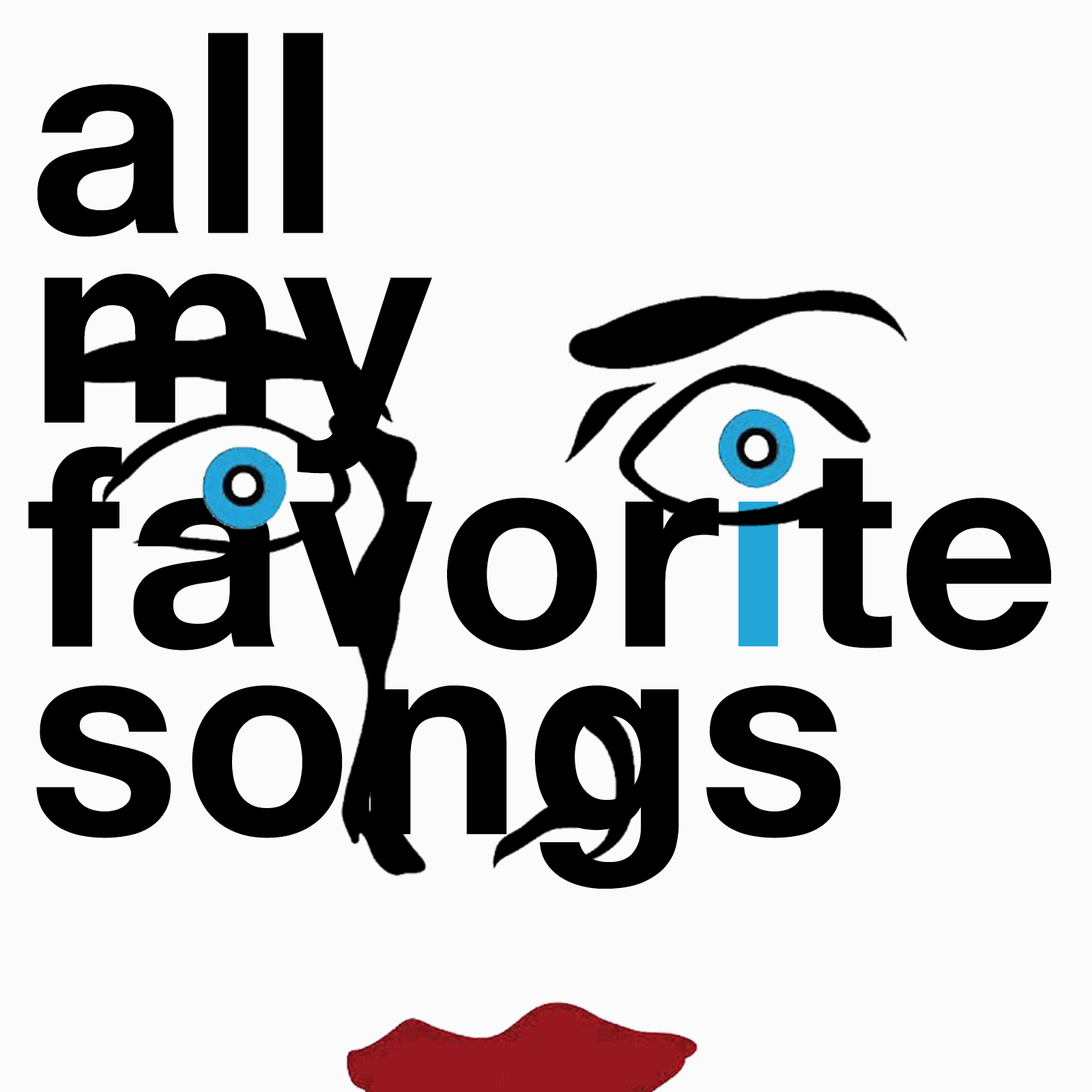
<style>
.page{position:relative;width:1092px;height:1092px;background:#fbfbfb}
.page>*{position:absolute;margin:0}
.t1{font:280px/224px "HelveticaNeue-Bold";letter-spacing:0.01em;color:#000000}
.t2{font:280px/189.5px "HelveticaNeue-Bold";letter-spacing:0.01em;color:#000000}
.t3{font:280px/187.6px "HelveticaNeue-Bold";letter-spacing:0.01em;color:#000000}
</style>
<div class="page">
<p class="t1" style="left:28px;top:33px;width:1024px;height:856px">all <br><span class="t2">my<br></span>favor te<br><span class="t3">songs</span></p>
</div>
